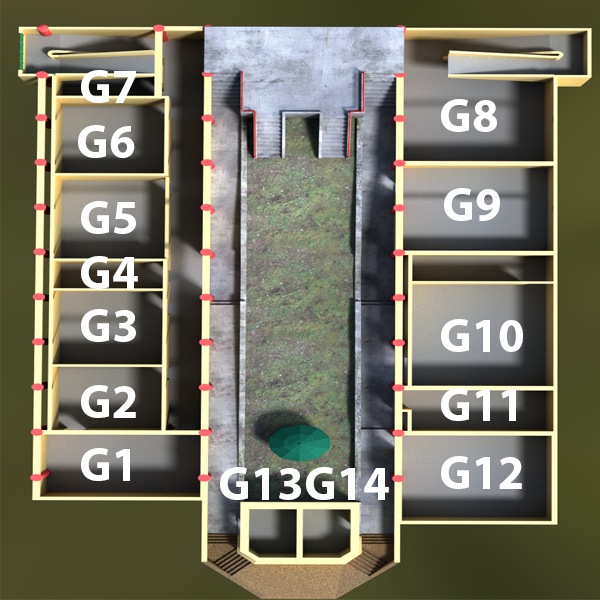
<style>
.page{position:relative;width:600px;height:600px}
.page>*{position:absolute;margin:0}
.t1{font:48px "MyriadPro-Bold";color:#ffffff}
</style>
<div class="page">
<p class="t1" style="left:81px;top:70px;width:55px;height:33px">G7</p>
<p class="t1" style="left:441px;top:99px;width:56px;height:33px">G8</p>
<p class="t1" style="left:78px;top:125px;width:57px;height:33px">G6</p>
<p class="t1" style="left:444px;top:188px;width:56px;height:33px">G9</p>
<p class="t1" style="left:81px;top:201px;width:55px;height:33px">G5</p>
<p class="t1" style="left:81px;top:256px;width:57px;height:33px">G4</p>
<p class="t1" style="left:81px;top:309px;width:55px;height:33px">G3</p>
<p class="t1" style="left:441px;top:319px;width:82px;height:33px">G10</p>
<p class="t1" style="left:81px;top:385px;width:55px;height:33px">G2</p>
<p class="t1" style="left:441px;top:388px;width:75px;height:33px">G11</p>
<p class="t1" style="left:81px;top:448px;width:49px;height:33px">G1</p>
<p class="t1" style="left:441px;top:456px;width:81px;height:33px">G12</p>
<p class="t1" style="left:220px;top:467px;width:81px;height:33px">G13</p>
<p class="t1" style="left:306px;top:467px;width:83px;height:33px">G14</p>
</div>
